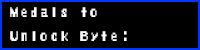
<style>
.page{position:relative;width:200px;height:50px;background:#000000}
.page>*{position:absolute;margin:0}
.t1{font:13px/24px "MegaManX";color:#ffffff;scale:0.77 1}
</style>
<div class="page">
<p class="t1" style="left:10px;top:7px;width:117px;height:34px">Medals to<br>Unlock Byte:</p>
</div>
